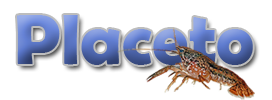
<style>
.page{position:relative;width:272px;height:100px;background:#ffffff}
.page>*{position:absolute;margin:0}
.t1{font:72px "BerlinSansFBDemi-Bold"}
</style>
<div class="page">
<p class="t1" style="left:17px;top:15px;width:236px;height:50px">Placeto</p>
</div>
